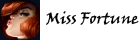
<style>
.page{position:relative;width:140px;height:40px;background:#ffffff}
.page>*{position:absolute;margin:0}
.t1{font:12px "VinerHandITC";color:#000000}
</style>
<div class="page">
<p class="t1" style="left:46px;top:11px;width:93px;height:14px">Miss Fortune</p>
</div>
